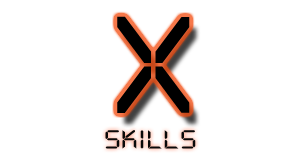
<style>
.page{position:relative;width:300px;height:160px;background:#ffffff}
.page>*{position:absolute;margin:0}
.t1{font:150.7px "DS-Digital";letter-spacing:-0.02em;color:#000000;scale:1.25 1}
.t2{font:28.7px "DS-Digital";letter-spacing:-0.02em;color:#090909;scale:1.25 1}
</style>
<div class="page">
<p class="t1" style="left:117px;top:16px;width:73px;height:97px">X</p>
<p class="t2" style="left:105px;top:130px;width:91px;height:19px">skills</p>
</div>
